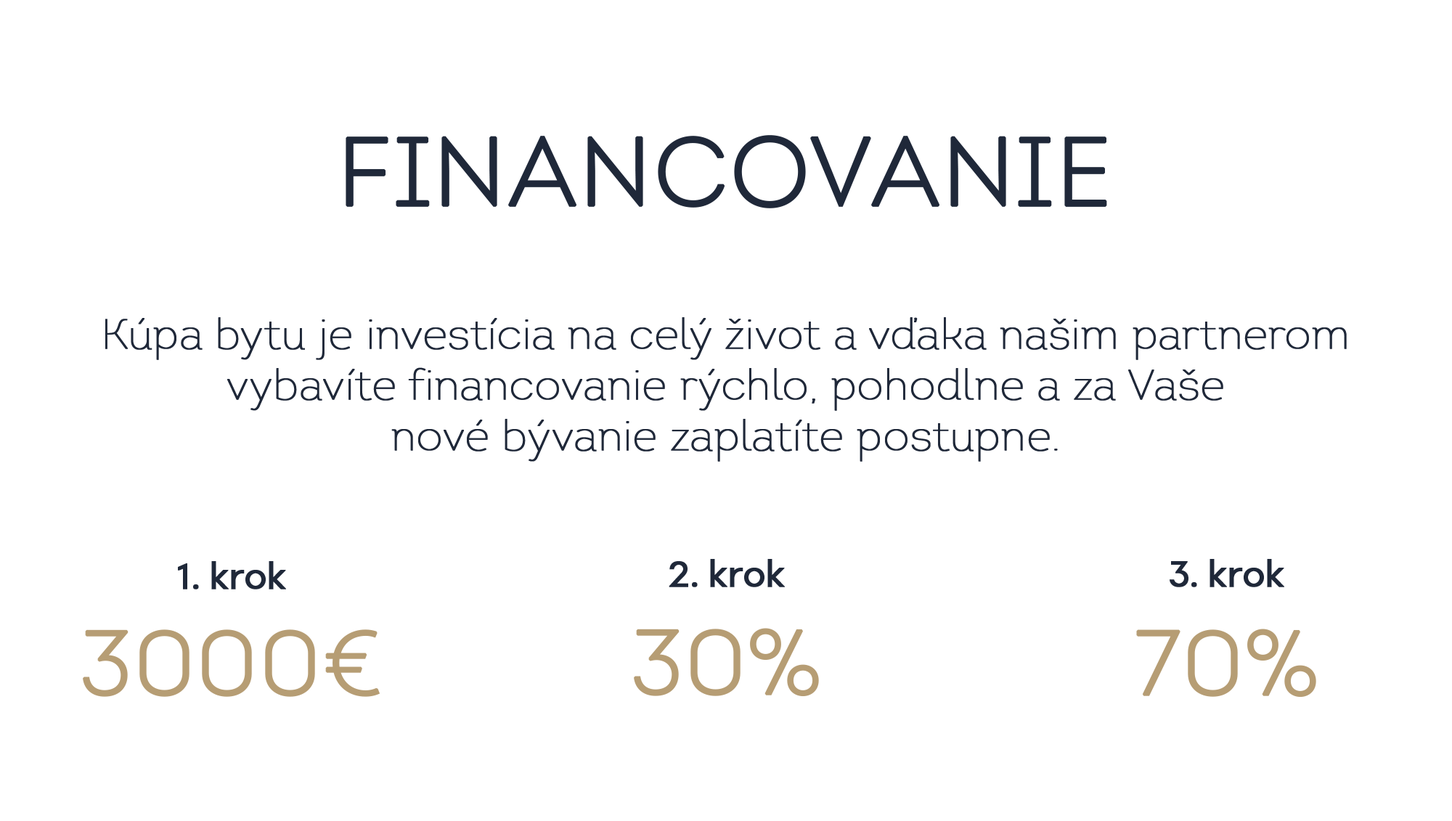
<style>
.page{position:relative;width:1452px;height:821px;background:#ffffff}
.page>*{position:absolute;margin:0}
.t1{font:96.8px "Intro-Light-Alt";color:#1f2839;text-transform:uppercase;font-weight:bold}
.t2{font:42.4px "Intro-Thin";color:#1f2839;font-weight:bold}
.t3{font:36.3px "SetupGrotesk-Regular";color:#1f2839;font-weight:bold}
.t4{font:90.7px "Intro-Light-Alt";color:#b69d74;font-weight:bold}
</style>
<div class="page">
<p class="t1" style="left:346px;top:135px;width:761px;height:73px">Financovanie</p>
<p class="t2" style="left:105px;top:317px;width:1242px;height:145px;text-align:center">Kúpa bytu je investícia na celý život a vďaka našim partnerom<br>vybavíte financovanie rýchlo, pohodlne a za Vaše<br>nové bývanie zaplatíte postupne.</p>
<p class="t3" style="left:178px;top:561px;width:108px;height:29px">1. krok</p>
<p class="t3" style="left:669px;top:559px;width:116px;height:28px">2. krok</p>
<p class="t3" style="left:1170px;top:559px;width:114px;height:28px">3. krok</p>
<p class="t4" style="left:83px;top:629px;width:297px;height:68px">3000€</p>
<p class="t4" style="left:634px;top:628px;width:185px;height:69px">30%</p>
<p class="t4" style="left:1136px;top:629px;width:180px;height:69px">70%</p>
</div>
